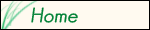
<style>
.page{position:relative;width:150px;height:30px;background:#fffaf0}
.page>*{position:absolute;margin:0}
.t1{font:20px "GeosansLight-Oblique";color:#008135;font-weight:bold}
</style>
<div class="page">
<p class="t1" style="left:31px;top:7px;width:47px;height:16px">Home</p>
</div>
